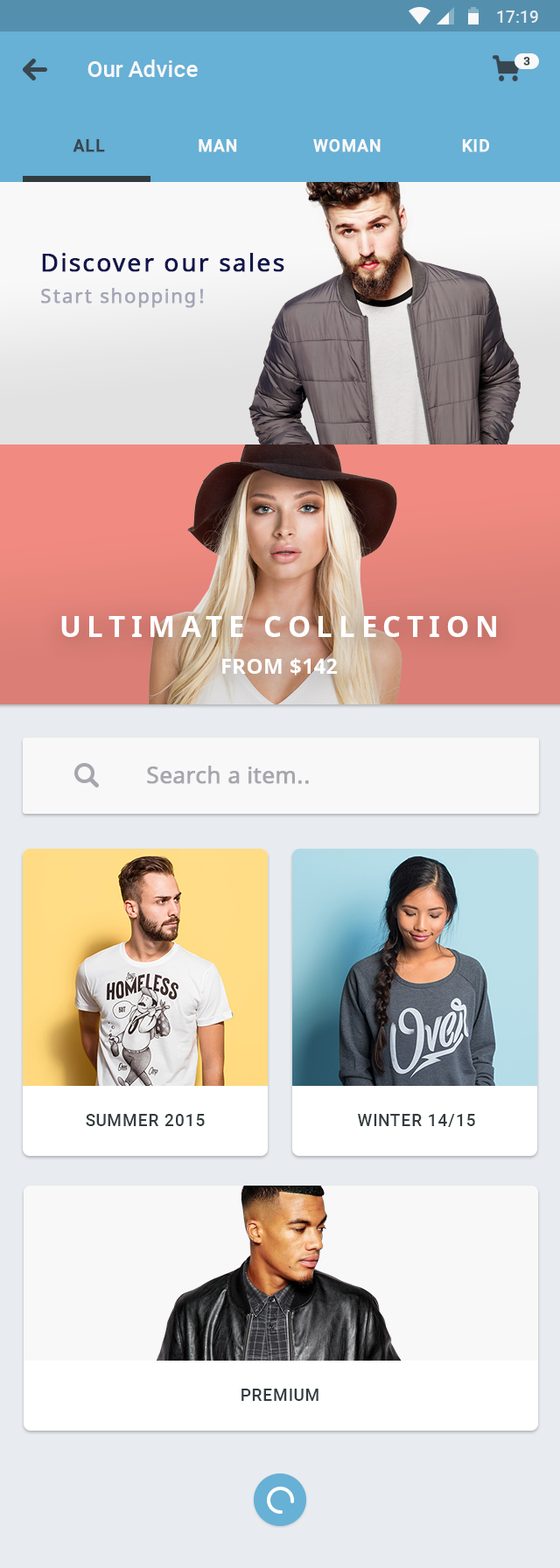
<style>
.page{position:relative;width:560px;height:1568px}
.page>*{position:absolute;margin:0}
.t1{font:16.6px "Roboto-Medium";color:#e8ecf0}
.t2{font:22.8px "Roboto-Medium";color:#f8f8f8}
.t3{font:11.4px "Roboto-Medium";letter-spacing:0.04em;color:#38474f;text-transform:uppercase;font-weight:bold}
.t4{font:16.6px "Roboto-Medium";letter-spacing:0.04em;color:#38474f;text-transform:uppercase;font-weight:bold}
.t5{font:16.6px "Roboto-Medium";letter-spacing:0.04em;color:#f8f8f8;text-transform:uppercase;font-weight:bold}
.t6{font:24.5px/31.5px "NotoSans";letter-spacing:0.06em;color:#13164c;font-weight:bold}
.t7{font:19.2px/31.5px "NotoSans";letter-spacing:0.06em;color:#a4a5b7;font-weight:bold}
.t8{font:28.9px/36.8px "NotoSans-Bold";letter-spacing:0.2em;color:#ffffff;text-transform:uppercase}
.t9{font:21px/36.8px "NotoSans-Bold";letter-spacing:0.02em;color:#ffffff;text-transform:uppercase}
.t10{font:22.8px "NotoSans";color:#a6a6ad;font-weight:bold}
.t11{font:16.6px "Roboto-Medium";letter-spacing:0.04em;color:#323c3f;text-transform:uppercase}
</style>
<div class="page">
<p class="t1" style="left:497px;top:10px;width:41px;height:13px">17:19</p>
<p class="t2" style="left:88px;top:60px;width:110px;height:17px">Our Advice</p>
<p class="t3" style="left:523px;top:57px;width:7px;height:9px">3</p>
<p class="t4" style="left:73px;top:139px;width:32px;height:13px">All</p>
<p class="t5" style="left:199px;top:139px;width:38px;height:13px">man</p>
<p class="t5" style="left:313px;top:139px;width:68px;height:13px">woman</p>
<p class="t5" style="left:462px;top:139px;width:27px;height:13px">kid</p>
<p class="t6" style="left:41px;top:253px;width:243px;height:55px">Discover our sales<br><span class="t7">Start shopping!</span></p>
<p class="t8" style="left:61px;top:616px;width:435px;height:60px;text-align:center">ultimate collection<br><span class="t9">from $142</span></p>
<p class="t10" style="left:147px;top:766px;width:162px;height:18px">Search a item..</p>
<p class="t11" style="left:86px;top:1114px;width:119px;height:12px">summer 2015</p>
<p class="t11" style="left:358px;top:1114px;width:117px;height:13px">winter 14/15</p>
<p class="t11" style="left:242px;top:1389px;width:76px;height:12px">premium</p>
</div>
